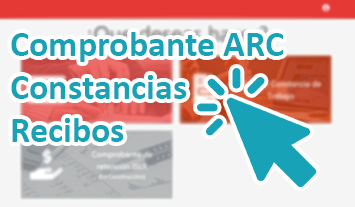
<style>
.page{position:relative;width:355px;height:207px;background:#f5f5f5}
.page>*{position:absolute;margin:0}
.t1{font:36px "Calibri-Bold";color:#17a2b8}
</style>
<div class="page">
<p class="t1" style="left:11px;top:32px;width:273px;height:110px">Comprobante ARC<br>Constancias<br>Recibos</p>
</div>
